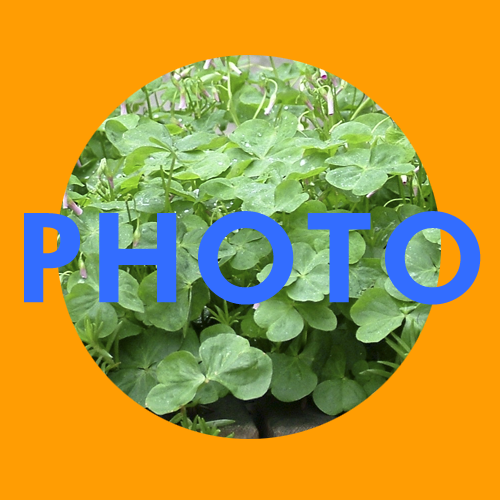
<style>
.page{position:relative;width:500px;height:500px;background:#ff9d03}
.page>*{position:absolute;margin:0}
.t1{font:124.5px "FuturaBT-Heavy";letter-spacing:0.05em;color:#326cff}
</style>
<div class="page">
<p class="t1" style="left:24px;top:211px;width:457px;height:94px">PHOTO</p>
</div>
